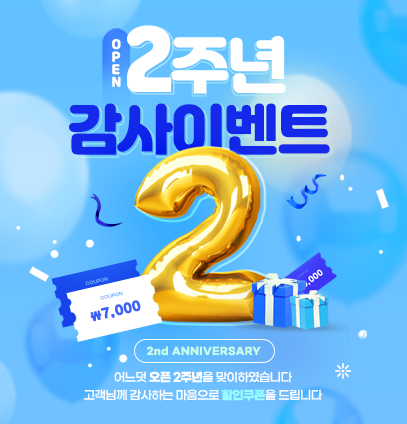
<style>
.page{position:relative;width:407px;height:424px}
.page>*{position:absolute;margin:0}
.t1{font:54.3px/62px "Jalnan";letter-spacing:-0.02em;color:#1429e9;text-transform:uppercase}
.t2{font:68.9px/67.3px "Jalnan";letter-spacing:-0.06em;color:#ffffff;text-transform:uppercase}
.t3{font:82px/67.3px "Jalnan";letter-spacing:-0.06em;color:#ffffff;text-transform:uppercase}
.t4{font:60.7px/67.3px "Jalnan";letter-spacing:-0.06em;color:#ffffff;text-transform:uppercase}
.t5{font:54.3px/62px "Jalnan";letter-spacing:-0.06em;color:#1429e9;text-transform:uppercase}
.t6{font:12.2px/12.6px "Jalnan";letter-spacing:0.02em;color:#ffffff;text-transform:uppercase}
.t7{font:4.2px "GmarketSansTTFMedium";letter-spacing:0.04em;color:#6bafff;text-transform:uppercase}
.t8{font:4.2px "GmarketSansTTFMedium";letter-spacing:0.04em;text-transform:uppercase}
.t9{font:14.4px "GangwonEduPowerExtraBold";letter-spacing:0.02em;color:#3b63f7;text-transform:uppercase}
.t10{font:12.3px "GangwonEduPowerExtraBold";letter-spacing:0.02em;color:#3b63f7;text-transform:uppercase}
.t11{font:10px "GmarketSansTTFBold";letter-spacing:0.04em;color:#c8ffe8;text-transform:uppercase}
.t12{font:10px "GmarketSansTTFBold";letter-spacing:0.04em;color:#c8ffe8}
.t13{font:12px/18px "GmarketSansTTFMedium";letter-spacing:-0.06em;color:#ffffff;text-transform:uppercase}
.t14{font:12px/18px "GmarketSansTTFBold";letter-spacing:-0.06em;color:#ffffff;text-transform:uppercase}
.t15{font:12px/18px "GmarketSansTTFBold";letter-spacing:-0.06em;color:#97fcff;text-transform:uppercase}
</style>
<div class="page">
<p class="t1" style="left:69px;top:25px;width:261px;height:130px;text-align:center"><span class="t2">  </span><span class="t3">2</span><span class="t4">주년 <br></span><span class="t5">감</span>사이벤트</p>
<p class="t6" style="left:112px;top:39px;width:9px;height:48px">o<br>p<br>e<br>n</p>
<p class="t7" style="left:85px;top:277px;width:23px;height:8px;rotate:-13deg">coupon</p>
<p class="t8" style="left:100px;top:291px;width:23px;height:9px;rotate:-13deg">coupon</p>
<p class="t9" style="left:90px;top:300px;width:51px;height:22px;rotate:-13deg"><span class="t10">\</span>7,000</p>
<p class="t11" style="left:147px;top:346px;width:114px;height:10px">2<span class="t12">nd</span> anniversary</p>
<p class="t13" style="left:84px;top:371px;width:239px;height:30px;text-align:center">어느덧 <span class="t14">오픈 2주년</span>을 맞이하였습니다<br>고객님께 감사하는 마음으로 <span class="t15">할인쿠폰</span>을 드립니다</p>
</div>
